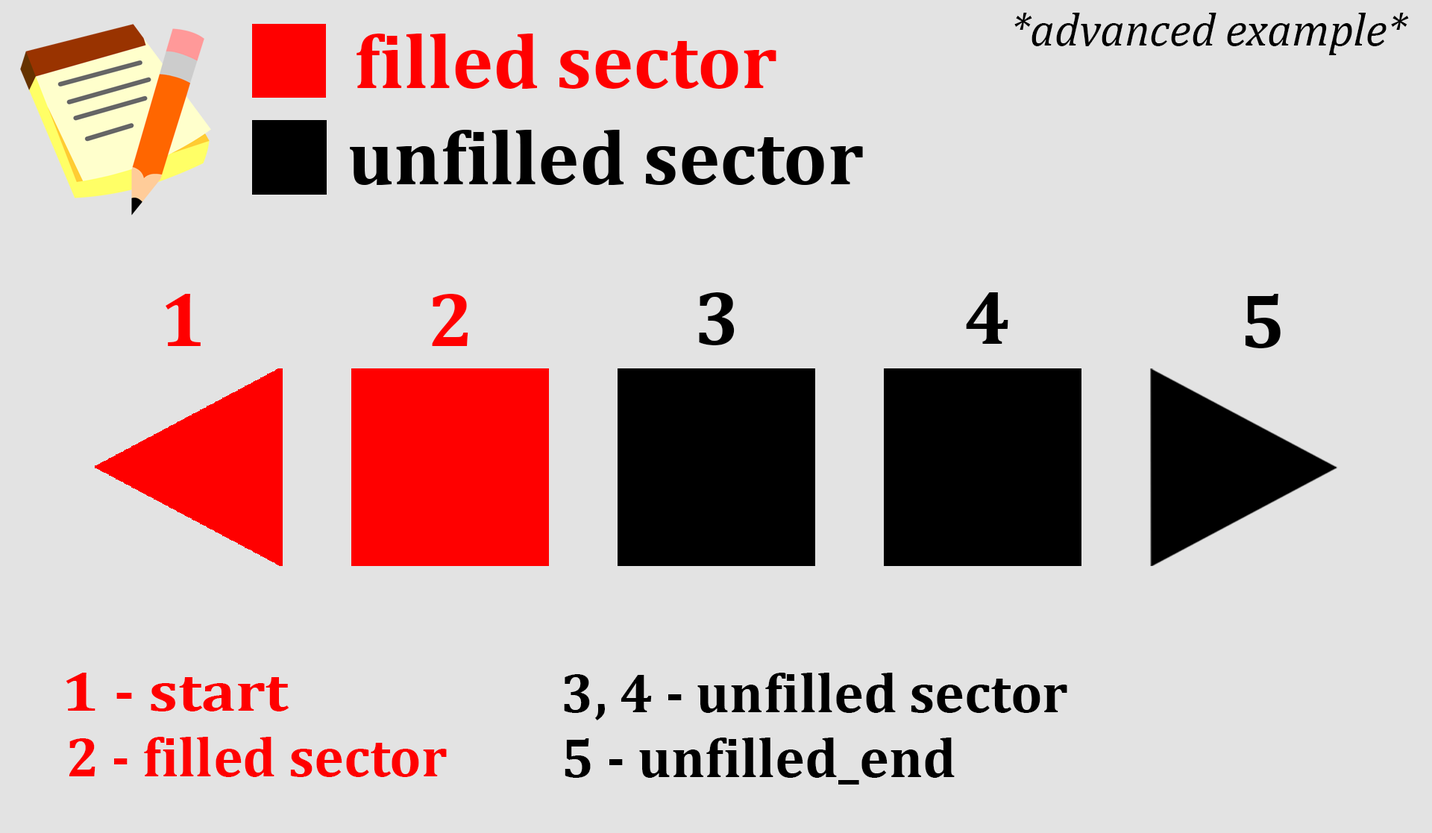
<style>
.page{position:relative;width:1432px;height:833px;background:#e3e3e3}
.page>*{position:absolute;margin:0}
.t1{font:46.6px "Cambria-Italic";color:#000000}
.t2{font:77.7px "Cambria-Bold";color:#ff0000}
.t3{font:77.7px "Cambria-Bold";color:#000000}
.t4{font:55.9px "Cambria-Bold";color:#ff0000;scale:1.14 1}
.t5{font:55.9px "Cambria-Bold";color:#000000}
.t6{font:55.9px "Cambria-Bold";color:#ff0000}
</style>
<div class="page">
<p class="t1" style="left:1014px;top:13px;width:395px;height:42px">*advanced example*</p>
<p class="t2" style="left:356px;top:34px;width:420px;height:55px">filled sector</p>
<p class="t2" style="left:166px;top:294px;width:35px;height:52px">1</p>
<p class="t2" style="left:432px;top:294px;width:36px;height:52px">2</p>
<p class="t3" style="left:699px;top:292px;width:35px;height:53px">3</p>
<p class="t3" style="left:966px;top:292px;width:42px;height:52px">4</p>
<p class="t3" style="left:1245px;top:294px;width:35px;height:54px">5</p>
<p class="t4" style="left:66px;top:673px;width:223px;height:38px">1 - start</p>
<p class="t5" style="left:564px;top:673px;width:503px;height:47px">3, 4 - unfilled sector</p>
<p class="t6" style="left:69px;top:737px;width:378px;height:40px">2 - filled sector</p>
<p class="t5" style="left:564px;top:737px;width:390px;height:47px">5 - unfilled_end</p>
</div>
